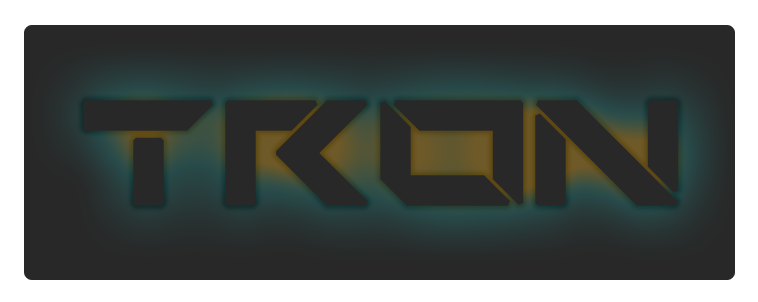
<style>
.page{position:relative;width:758px;height:302px;background:#282828}
.page>*{position:absolute;margin:0}
.t1{font:200px "TechnoHideo";color:#282828;font-weight:bold}
</style>
<div class="page">
<p class="t1" style="left:83px;top:100px;width:596px;height:106px">TRON</p>
</div>
